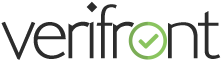
<style>
.page{position:relative;width:223px;height:60px;background:#ffffff}
.page>*{position:absolute;margin:0}
.t1{font:79.1px "LondonMM";letter-spacing:-0.061em;color:#2c2c2c}
</style>
<div class="page">
<p class="t1" style="left:1px;top:1px;width:220px;height:59px">verifr  nt</p>
</div>
